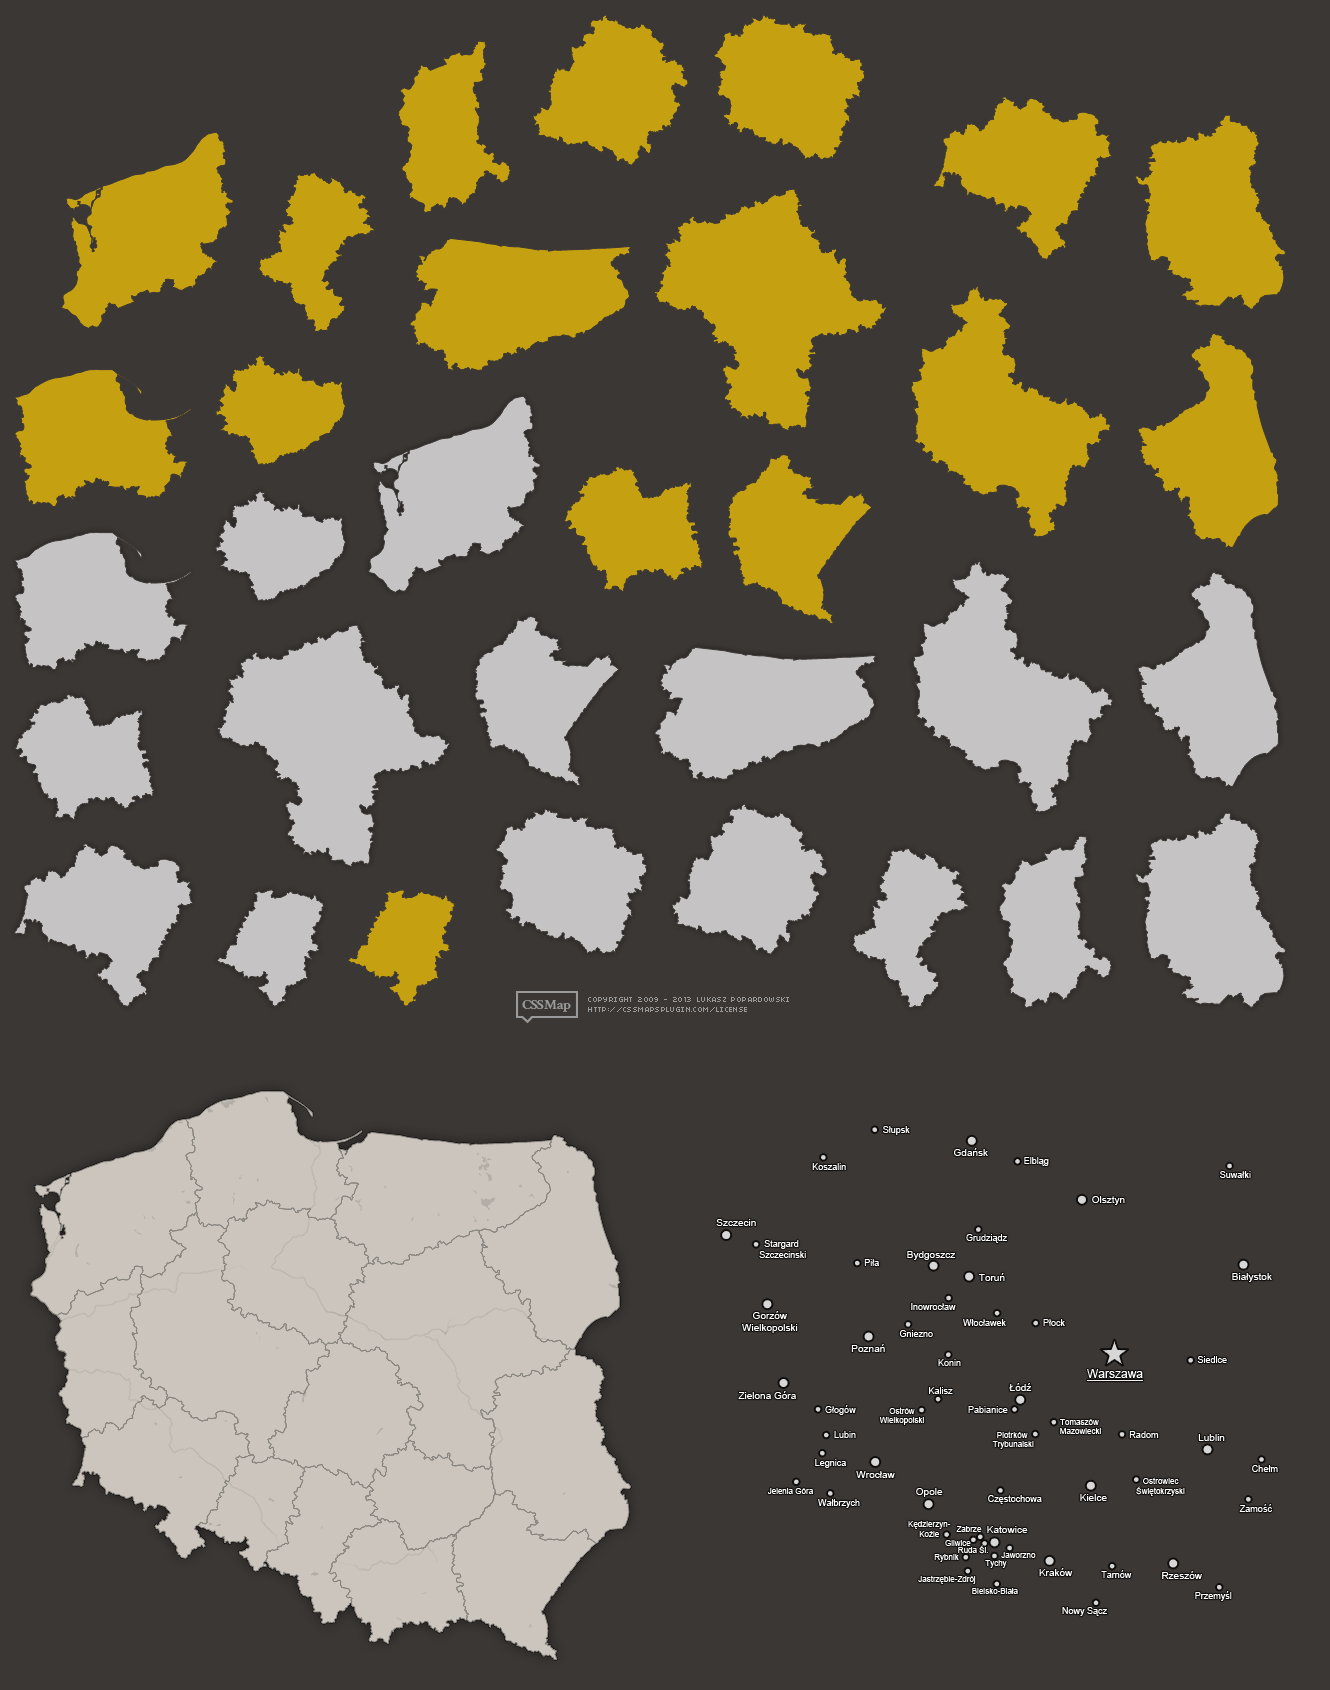
<style>
.page{position:relative;width:1330px;height:1690px;background:#3b3735}
.page>*{position:absolute;margin:0}
.t1{font:9px "ArialMT";color:#ffffff}
.t2{font:10px "ArialMT";color:#ffffff}
.t3{font:12px "ArialMT";color:#ffffff;text-decoration:underline}
.t4{font:8px "ArialMT";color:#ffffff}
</style>
<div class="page">
<p class="t1" style="left:883px;top:1126px;width:27px;height:9px">Słupsk</p>
<p class="t2" style="left:954px;top:1148px;width:34px;height:8px">Gdańsk</p>
<p class="t1" style="left:1024px;top:1157px;width:25px;height:9px">Elbląg</p>
<p class="t1" style="left:812px;top:1163px;width:34px;height:7px">Koszalin</p>
<p class="t1" style="left:1220px;top:1171px;width:31px;height:7px">Suwałki</p>
<p class="t2" style="left:1092px;top:1196px;width:33px;height:9px">Olsztyn</p>
<p class="t2" style="left:716px;top:1219px;width:40px;height:7px">Szczecin</p>
<p class="t1" style="left:759px;top:1240px;width:47px;height:18px;text-align:center">Stargard <br>Szczecinski</p>
<p class="t1" style="left:966px;top:1234px;width:41px;height:9px">Grudziądz</p>
<p class="t2" style="left:907px;top:1251px;width:49px;height:9px">Bydgoszcz</p>
<p class="t1" style="left:864px;top:1259px;width:15px;height:7px">Piła</p>
<p class="t2" style="left:978px;top:1273px;width:27px;height:8px">Toruń</p>
<p class="t2" style="left:1232px;top:1273px;width:40px;height:9px">Białystok</p>
<p class="t2" style="left:742px;top:1311px;width:56px;height:22px;text-align:center">Gorzów<br>Wielkopolski</p>
<p class="t1" style="left:911px;top:1303px;width:45px;height:7px">Inowrocław</p>
<p class="t1" style="left:963px;top:1319px;width:43px;height:7px">Włocławek</p>
<p class="t1" style="left:1043px;top:1319px;width:22px;height:7px">Płock</p>
<p class="t1" style="left:899px;top:1330px;width:34px;height:7px">Gniezno</p>
<p class="t2" style="left:851px;top:1344px;width:34px;height:8px">Poznań</p>
<p class="t1" style="left:938px;top:1359px;width:23px;height:7px">Konin</p>
<p class="t1" style="left:1197px;top:1356px;width:30px;height:7px">Siedlce</p>
<p class="t3" style="left:1086px;top:1369px;width:57px;height:12px">Warszawa</p>
<p class="t2" style="left:1009px;top:1383px;width:23px;height:8px">Łódź</p>
<p class="t2" style="left:738px;top:1391px;width:58px;height:8px">Zielona Góra</p>
<p class="t1" style="left:929px;top:1387px;width:24px;height:7px">Kalisz</p>
<p class="t1" style="left:825px;top:1405px;width:31px;height:10px">Głogów</p>
<p class="t4" style="left:879px;top:1407px;width:45px;height:18px;text-align:center">Ostrów<br>Wielkopolski</p>
<p class="t1" style="left:968px;top:1406px;width:40px;height:7px">Pabianice</p>
<p class="t4" style="left:1060px;top:1419px;width:41px;height:15px;text-align:center">Tomaszów <br>Mazowiecki</p>
<p class="t1" style="left:834px;top:1431px;width:22px;height:7px">Lubin</p>
<p class="t4" style="left:992px;top:1431px;width:42px;height:18px;text-align:center">Piotrków <br>Trybunalski</p>
<p class="t1" style="left:1129px;top:1431px;width:30px;height:7px">Radom</p>
<p class="t2" style="left:1198px;top:1434px;width:27px;height:7px">Lublin</p>
<p class="t1" style="left:815px;top:1459px;width:31px;height:9px">Legnica</p>
<p class="t1" style="left:1252px;top:1465px;width:26px;height:7px">Chełm</p>
<p class="t2" style="left:856px;top:1471px;width:39px;height:7px">Wrocław</p>
<p class="t4" style="left:1136px;top:1477px;width:49px;height:19px;text-align:center">Ostrowiec<br>Świętokrzyski</p>
<p class="t4" style="left:767px;top:1488px;width:46px;height:6px">Jelenia Góra</p>
<p class="t2" style="left:916px;top:1488px;width:27px;height:9px">Opole</p>
<p class="t2" style="left:1080px;top:1494px;width:27px;height:7px">Kielce</p>
<p class="t1" style="left:818px;top:1499px;width:42px;height:9px">Wałbrzych</p>
<p class="t1" style="left:988px;top:1495px;width:54px;height:9px">Częstochowa</p>
<p class="t1" style="left:1239px;top:1504px;width:33px;height:8px">Zamość</p>
<p class="t4" style="left:908px;top:1521px;width:43px;height:16px;text-align:center">Kędzierzyn-<br>Koźle</p>
<p class="t4" style="left:956px;top:1526px;width:26px;height:6px">Zabrze</p>
<p class="t2" style="left:987px;top:1526px;width:41px;height:7px">Katowice</p>
<p class="t4" style="left:945px;top:1540px;width:26px;height:6px">Gliwice</p>
<p class="t4" style="left:934px;top:1554px;width:25px;height:8px">Rybnik</p>
<p class="t4" style="left:958px;top:1545px;width:30px;height:9px">Ruda Śl.</p>
<p class="t4" style="left:1001px;top:1552px;width:35px;height:6px">Jaworzno</p>
<p class="t4" style="left:985px;top:1560px;width:22px;height:8px">Tychy</p>
<p class="t4" style="left:918px;top:1575px;width:58px;height:9px">Jastrzębie-Zdrój</p>
<p class="t2" style="left:1039px;top:1568px;width:34px;height:8px">Kraków</p>
<p class="t1" style="left:1101px;top:1570px;width:31px;height:8px">Tarnów</p>
<p class="t2" style="left:1162px;top:1571px;width:40px;height:8px">Rzeszów</p>
<p class="t4" style="left:972px;top:1588px;width:46px;height:6px">Bielsko-Biała</p>
<p class="t1" style="left:1195px;top:1591px;width:37px;height:10px">Przemyśl</p>
<p class="t1" style="left:1062px;top:1607px;width:45px;height:9px">Nowy Sącz</p>
</div>
